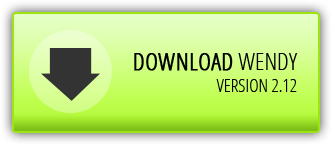
<style>
.page{position:relative;width:332px;height:145px}
.page>*{position:absolute;margin:0}
.t1{font:18.1px "OpenSans-CondensedLight";color:#000000;text-transform:uppercase}
.t2{font:24.1px "OpenSans-CondensedLight";color:#000000;text-transform:uppercase;font-weight:bold}
.t3{font:24.1px "OpenSans-CondensedLight";color:#000000;text-transform:uppercase}
</style>
<div class="page">
<p class="t1" style="left:134px;top:53px;width:164px;height:39px;text-align:right"><span class="t2">download </span><span class="t3">wendy<br></span>version 2.12</p>
</div>
